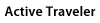
<style>
.page{position:relative;width:100px;height:23px;background:#ffffff}
.page>*{position:absolute;margin:0}
.t1{font:14px "MyriadPro-Semibold";color:#000000}
</style>
<div class="page">
<p class="t1" style="left:4px;top:6px;width:92px;height:10px">Active Traveler</p>
</div>
